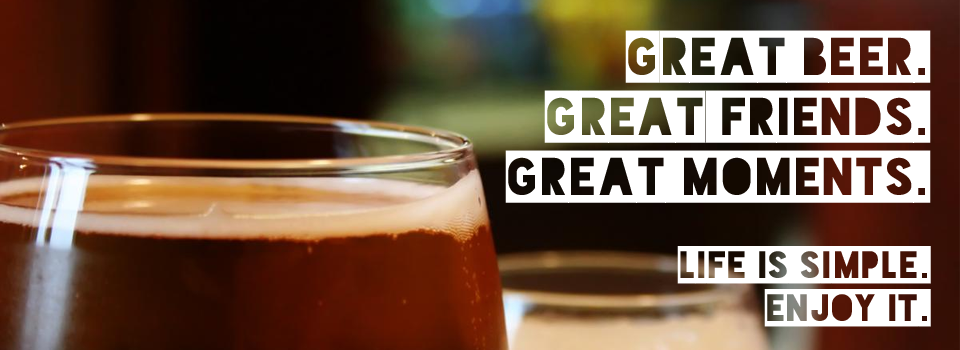
<style>
.page{position:relative;width:960px;height:350px}
.page>*{position:absolute;margin:0}
.t1{font:50px "Blackout-TwoAM";color:#ffffff;text-transform:uppercase}
.t2{font:36px "Blackout-TwoAM";color:#ffffff;text-transform:uppercase}
</style>
<div class="page">
<p class="t1" style="left:505px;top:30px;width:426px;height:173px;text-align:right">great beer.<br>great friends.<br>great moments.</p>
<p class="t2" style="left:677px;top:246px;width:254px;height:81px;text-align:right">life is simple.<br>enjoy it.</p>
</div>
